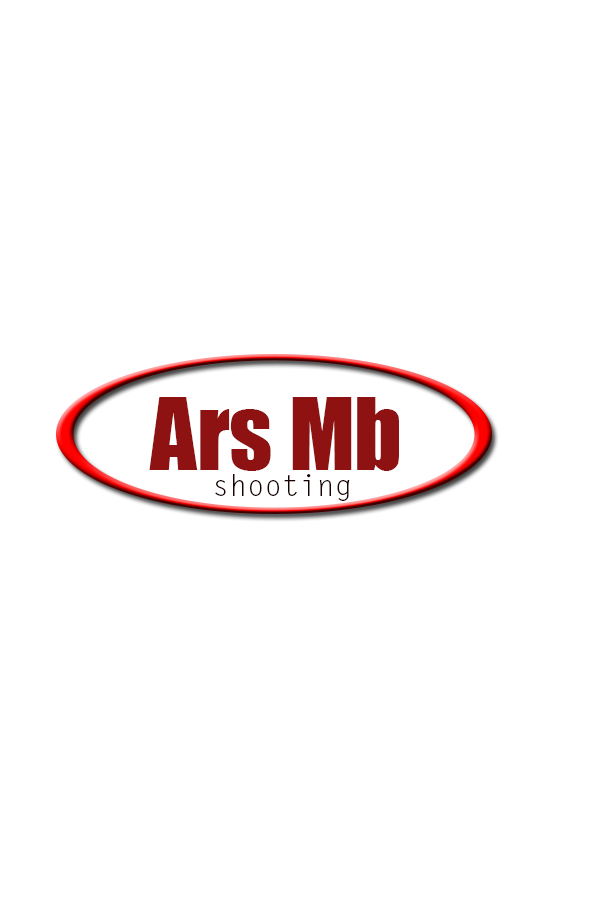
<style>
.page{position:relative;width:600px;height:900px;background:#ffffff}
.page>*{position:absolute;margin:0}
.t1{font:91.7px "Impact";color:#8e1212}
.t2{font:29.2px "LetterGothicStd";color:#1a0101}
</style>
<div class="page">
<p class="t1" style="left:149px;top:397px;width:250px;height:74px">Ars Mb</p>
<p class="t2" style="left:215px;top:474px;width:135px;height:27px">shooting</p>
</div>
